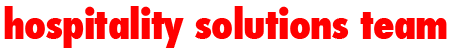
<style>
.page{position:relative;width:452px;height:54px;background:#ffffff}
.page>*{position:absolute;margin:0}
.t1{font:40px "Futura-CondensedExtraBold";letter-spacing:-0.02em;color:#ff0000}
</style>
<div class="page">
<p class="t1" style="left:4px;top:6px;width:443px;height:42px">hospitality solutions team</p>
</div>
